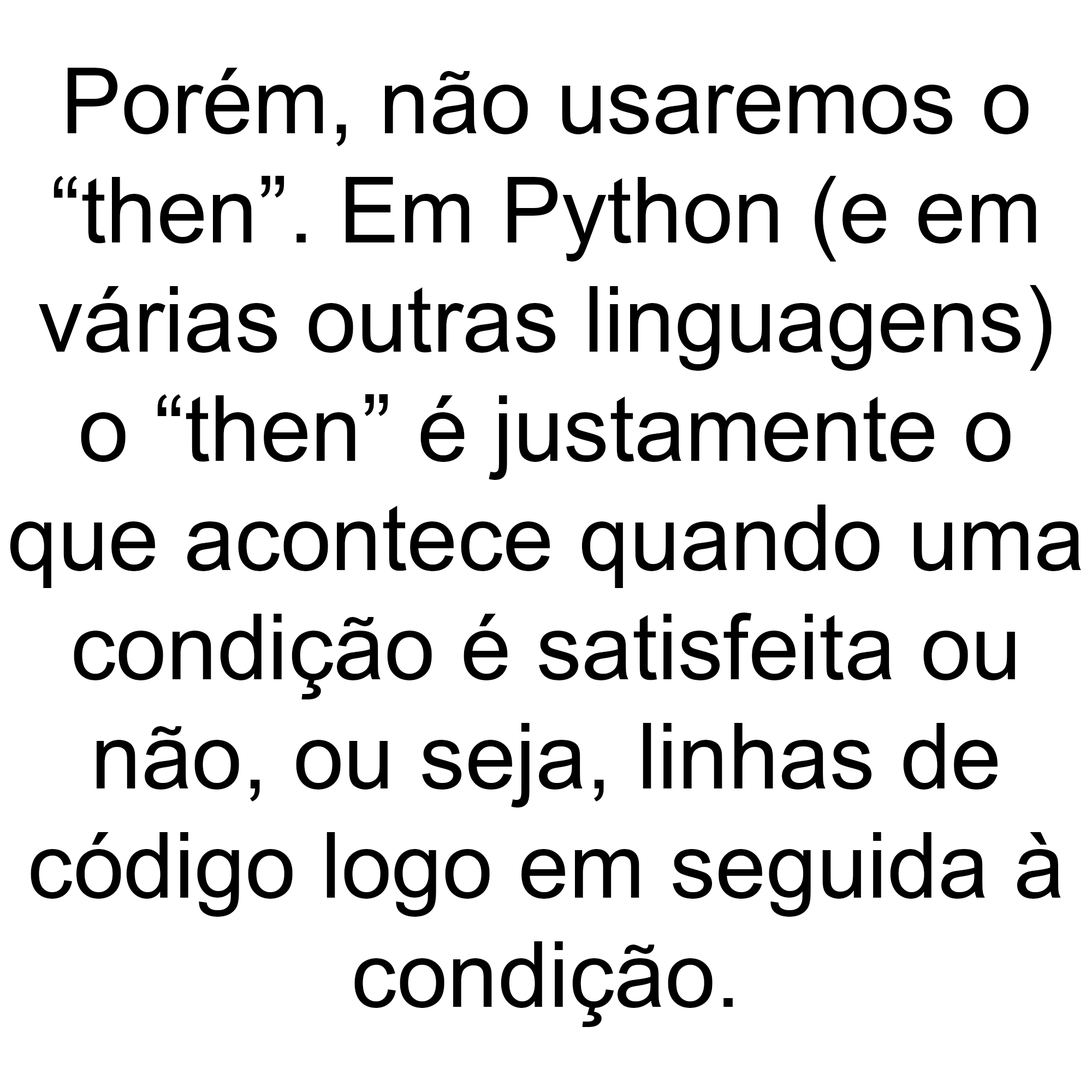
<style>
.page{position:relative;width:1092px;height:1092px;background:#ffffff}
.page>*{position:absolute;margin:0}
.t1{font:91px "ArialMT";color:#000000}
</style>
<div class="page">
<p class="t1" style="left:10px;top:68px;width:1071px;height:959px;text-align:center">Porém, não usaremos o<br>“then”. Em Python (e em<br>várias outras linguagens)<br>o “then” é justamente o<br>que acontece quando uma<br>condição é satisfeita ou<br>não, ou seja, linhas de<br>código logo em seguida à<br>condição.</p>
</div>
